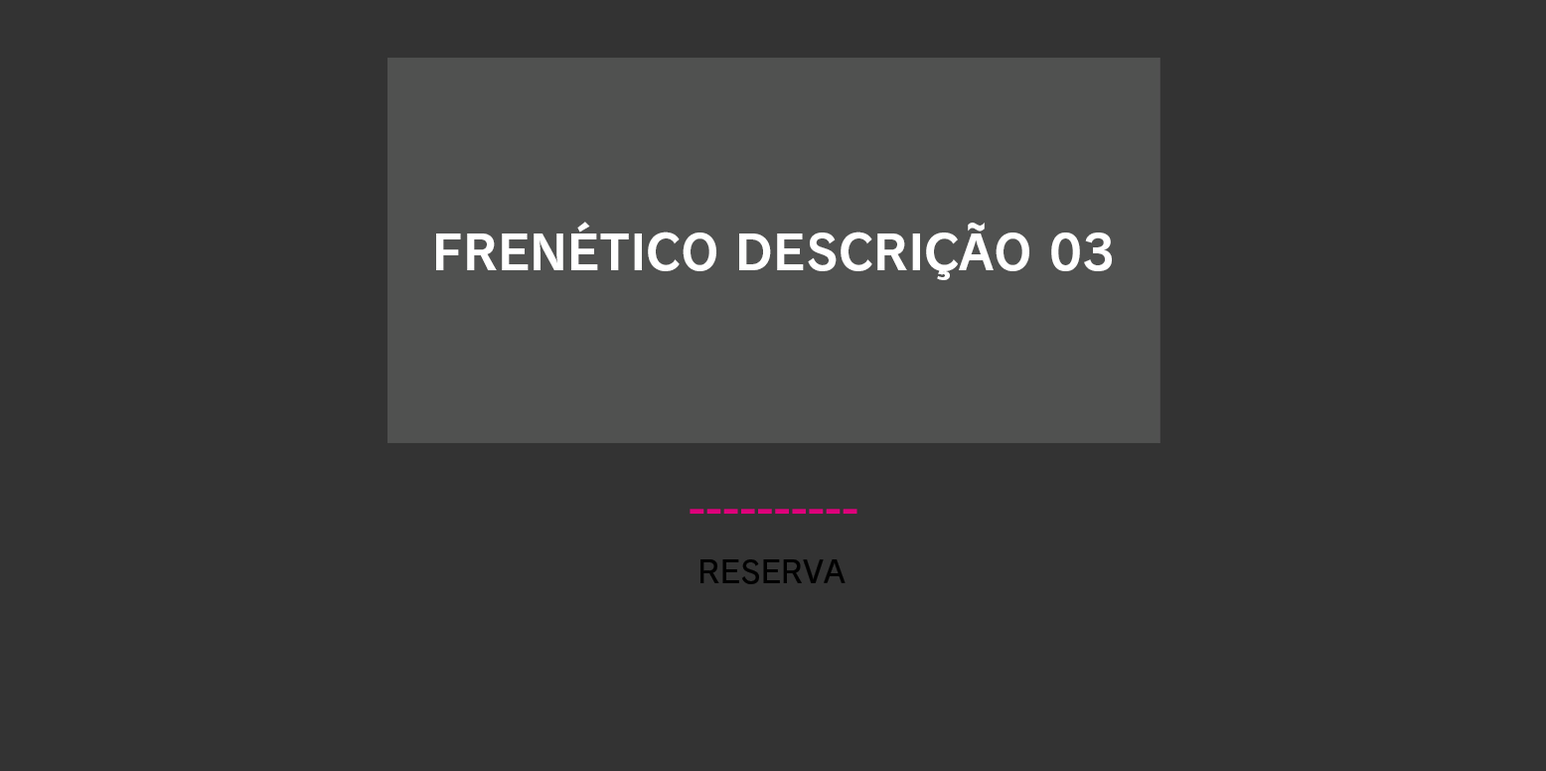
<style>
.page{position:relative;width:1546px;height:771px;background:#333333}
.page>*{position:absolute;margin:0}
.t1{font:47.7px "RodinNTLGPro-B";color:#ffffff}
.t2{font:30.5px "RodinNTLGPro-DB";color:#010101}
</style>
<div class="page">
<p class="t1" style="left:436px;top:222px;width:676px;height:58px">FRENÉTICO DESCRIÇÃO 03</p>
<p class="t2" style="left:701px;top:559px;width:145px;height:25px">RESERVA</p>
</div>
